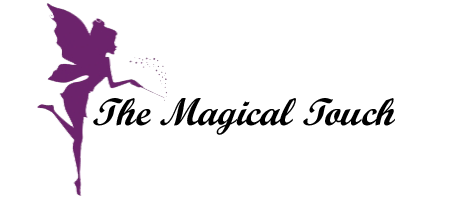
<style>
.page{position:relative;width:456px;height:200px;background:#ffffff}
.page>*{position:absolute;margin:0}
.t1{font:38.7px "ScriptMTBold";color:#000000;font-style:italic}
</style>
<div class="page">
<p class="t1" style="left:93px;top:98px;width:302px;height:37px">The Magical Touch</p>
</div>
